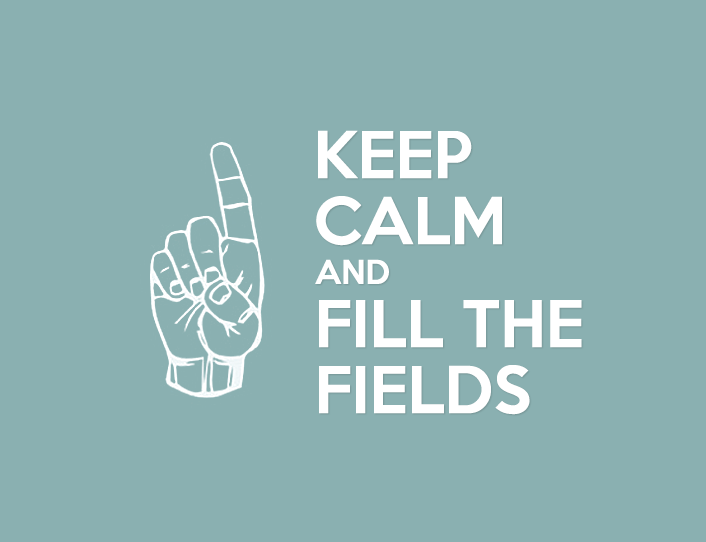
<style>
.page{position:relative;width:706px;height:542px;background:#8ab0b1}
.page>*{position:absolute;margin:0}
.t1{font:59px/66px "KeepCalm-Medium";color:#ffffff}
.t2{font:29.8px "KeepCalm-Medium";color:#ffffff}
</style>
<div class="page">
<p class="t1" style="left:316px;top:130px;width:186px;height:116px">KEEP<br>CALM</p>
<p class="t2" style="left:315px;top:259px;width:74px;height:25px">AND</p>
<p class="t1" style="left:319px;top:300px;width:263px;height:115px">FILL THE<br>FIELDS</p>
</div>
